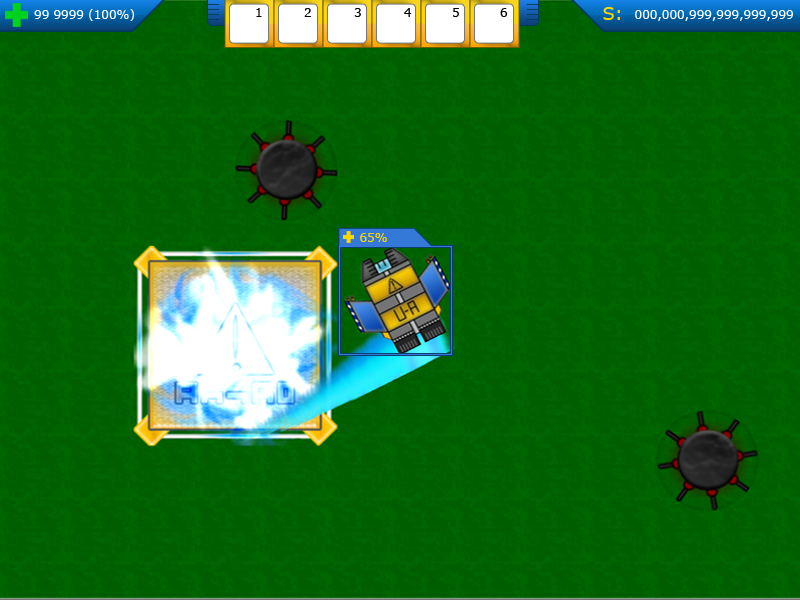
<style>
.page{position:relative;width:800px;height:600px;background:#005e00}
.page>*{position:absolute;margin:0}
.t1{font:12px "Verdana";color:#ffffff}
.t2{font:12px "Verdana";color:#000000}
.t3{font:18px "Verdana";color:#ffd800}
.t4{font:12px "Verdana";color:#ffd800}
</style>
<div class="page">
<p class="t1" style="left:34px;top:9px;width:100px;height:12px">99 9999 (100%)</p>
<p class="t2" style="left:256px;top:8px;width:6px;height:9px">1</p>
<p class="t2" style="left:304px;top:8px;width:7px;height:9px">2</p>
<p class="t2" style="left:354px;top:8px;width:7px;height:9px">3</p>
<p class="t2" style="left:404px;top:8px;width:8px;height:9px">4</p>
<p class="t2" style="left:453px;top:8px;width:6px;height:9px">5</p>
<p class="t2" style="left:500px;top:8px;width:8px;height:9px">6</p>
<p class="t3" style="left:603px;top:7px;width:17px;height:13px">S:</p>
<p class="t1" style="left:635px;top:10px;width:158px;height:11px">000,000,999,999,999,999</p>
<p class="t4" style="left:360px;top:233px;width:27px;height:9px">65%</p>
</div>
